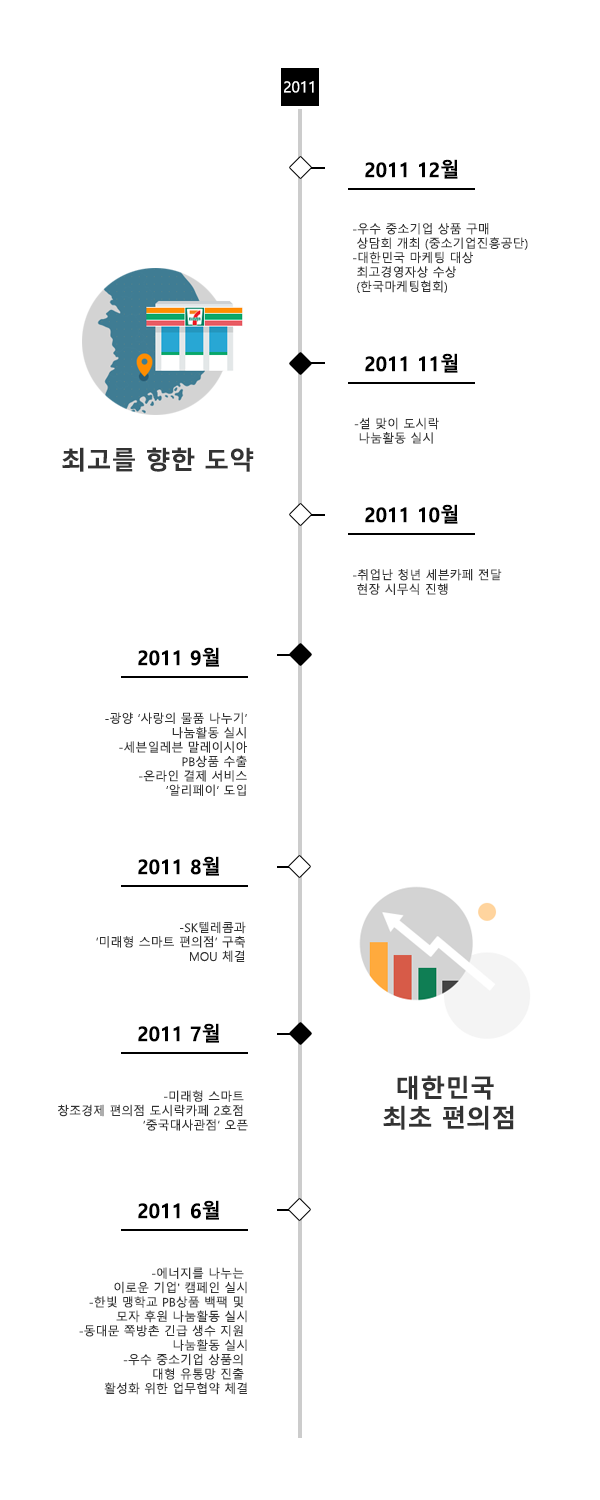
<style>
.page{position:relative;width:600px;height:1500px;background:#ffffff}
.page>*{position:absolute;margin:0}
.t1{font:15px "MalgunGothicRegular";color:#ffffff}
.t2{font:20.2px "MalgunGothicBold";color:#000000}
.t3{font:12px "MalgunGothicRegular";color:#333333}
.t4{font:25px "MalgunGothicBold";color:#333333}
</style>
<div class="page">
<p class="t1" style="left:284px;top:81px;width:30px;height:12px">2011</p>
<p class="t2" style="left:365px;top:159px;width:93px;height:20px">2011 12월</p>
<p class="t3" style="left:353px;top:223px;width:175px;height:70px">-우수 중소기업 상품 구매 <br> 상담회 개최 (중소기업진흥공단)<br>-대한민국 마케팅 대상 <br> 최고경영자상 수상 <br> (한국마케팅협회)</p>
<p class="t2" style="left:365px;top:353px;width:93px;height:20px">2011 11월</p>
<p class="t3" style="left:354px;top:417px;width:85px;height:27px">-설 맞이 도시락 <br> 나눔활동 실시</p>
<p class="t4" style="left:62px;top:447px;width:192px;height:25px">최고를 향한 도약</p>
<p class="t2" style="left:365px;top:504px;width:93px;height:20px">2011 10월</p>
<p class="t3" style="left:353px;top:569px;width:149px;height:26px">-취업난 청년 세븐카페 전달 <br> 현장 시무식 진행</p>
<p class="t2" style="left:138px;top:647px;width:81px;height:20px">2011 9월</p>
<p class="t3" style="left:105px;top:712px;width:142px;height:84px;text-align:right">-광양 ‘사랑의 물품 나누기’<br> 나눔활동 실시<br>-세븐일레븐 말레이시아<br> PB상품 수출<br>-온라인 결제 서비스<br> ‘알리페이’ 도입</p>
<p class="t2" style="left:138px;top:856px;width:81px;height:20px">2011 8월</p>
<p class="t3" style="left:96px;top:921px;width:150px;height:41px;text-align:right">-SK텔레콤과<br> ‘미래형 스마트 편의점’ 구축<br> MOU 체결</p>
<p class="t2" style="left:138px;top:1023px;width:81px;height:20px">2011 7월</p>
<p class="t4" style="left:383px;top:1075px;width:131px;height:55px;text-align:center">대한민국 <br>최초 편의점</p>
<p class="t3" style="left:58px;top:1090px;width:190px;height:41px;text-align:right">-미래형 스마트 <br>창조경제 편의점 도시락카페 2호점 <br>‘중국대사관점’ 오픈</p>
<p class="t2" style="left:138px;top:1200px;width:81px;height:20px">2011 6월</p>
<p class="t3" style="left:79px;top:1267px;width:168px;height:128px;text-align:right">-에너지를 나누는 <br>이로운 기업' 캠페인 실시<br>-한빛 맹학교 PB상품 백팩 및 <br>모자 후원 나눔활동 실시<br>-동대문 쪽방촌 긴급 생수 지원 <br>나눔활동 실시<br>-우수 중소기업 상품의 <br>대형 유통망 진출 <br>활성화 위한 업무협약 체결</p>
</div>
